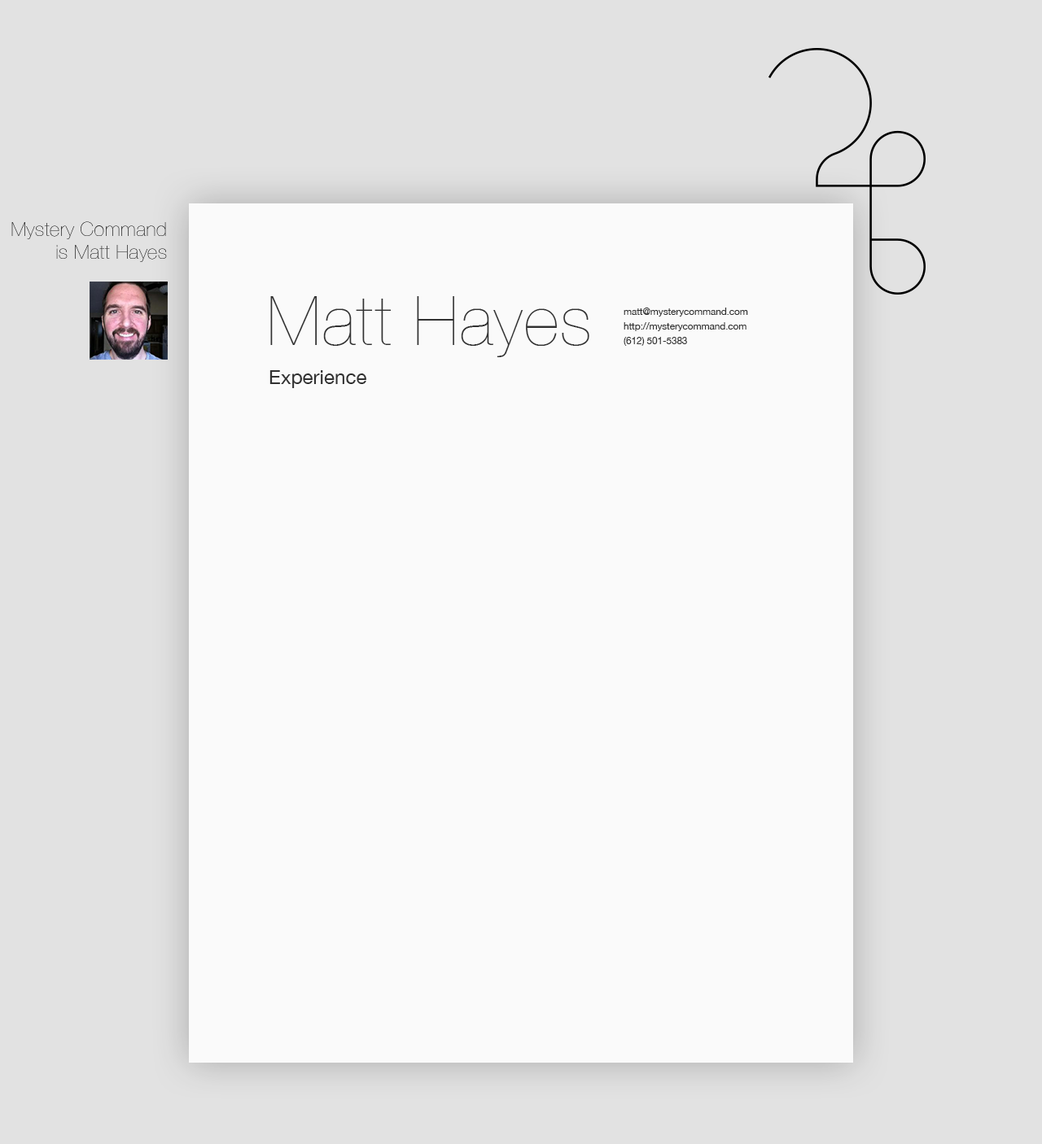
<style>
.page{position:relative;width:1042px;height:1144px;background:#fafafa}
.page>*{position:absolute;margin:0}
.t1{font:19.5px/22.8px "HelveticaNeue-UltraLight";letter-spacing:0.025em;color:#313131}
.t2{font:68.4px "HelveticaNeue-UltraLight";letter-spacing:0.025em;color:#313131}
.t3{font:9.8px/14.7px "HelveticaNeue";letter-spacing:-0.01em;color:#313131}
.t4{font:19.5px "HelveticaNeue";color:#313131}
</style>
<div class="page">
<p class="t1" style="left:11px;top:221px;width:156px;height:41px;text-align:right">Mystery Command<br>is Matt Hayes</p>
<p class="t2" style="left:270px;top:296px;width:319px;height:61px">Matt Hayes</p>
<p class="t3" style="left:624px;top:308px;width:124px;height:38px">matt@mysterycommand.com<br>http://mysterycommand.com<br>(612) 501-5383</p>
<p class="t4" style="left:269px;top:370px;width:97px;height:18px">Experience</p>
</div>
